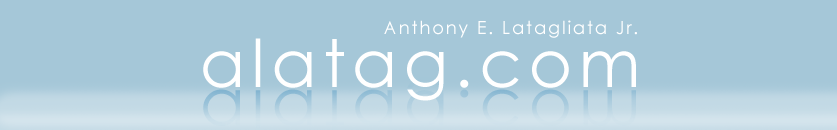
<style>
.page{position:relative;width:837px;height:130px;background:#a5c7d8}
.page>*{position:absolute;margin:0}
.t1{font:18px "CenturyGothic";letter-spacing:0.1em;color:#ffffff}
.t2{font:65.9px "CenturyGothic";letter-spacing:0.1em;color:#ffffff}
</style>
<div class="page">
<p class="t1" style="left:384px;top:20px;width:253px;height:18px">Anthony E. Latagliata Jr.</p>
<p class="t2" style="left:203px;top:38px;width:433px;height:63px">alatag.com</p>
</div>
